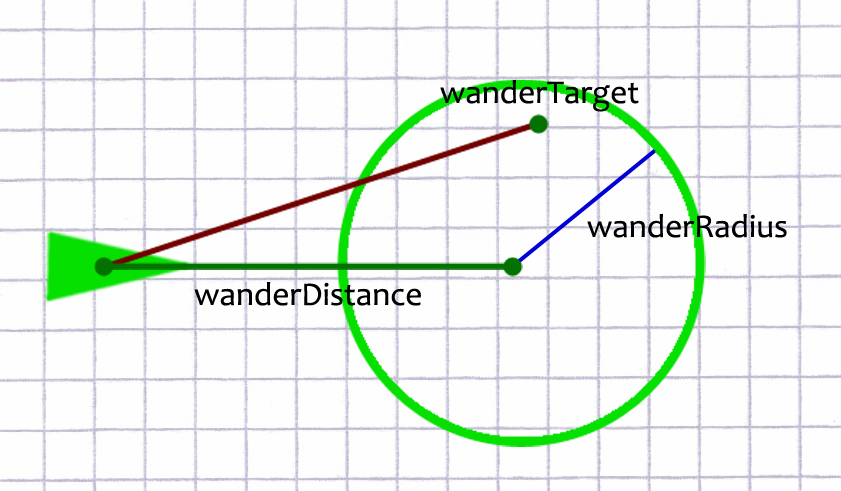
<style>
.page{position:relative;width:841px;height:491px;background:#fefefe}
.page>*{position:absolute;margin:0}
.t1{font:33.3px "Candara";color:#000000}
</style>
<div class="page">
<p class="t1" style="left:440px;top:79px;width:199px;height:33px">wanderTarget</p>
<p class="t1" style="left:587px;top:213px;width:200px;height:25px">wanderRadius</p>
<p class="t1" style="left:194px;top:281px;width:227px;height:25px">wanderDistance</p>
</div>
